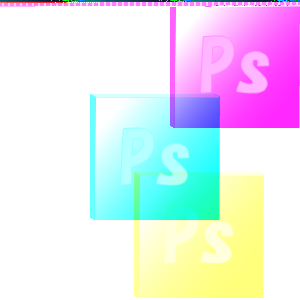
<style>
.page{position:relative;width:300px;height:300px;background:#ffffff}
.page>*{position:absolute;margin:0}
.t1{font:72px "HGSoeiKakupoptai";color:#b4ffff}
</style>
<div class="page">
<p class="t1" style="left:121px;top:126px;width:68px;height:57px">Ps</p>
</div>
